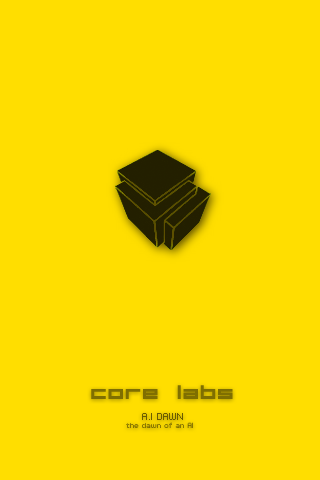
<style>
.page{position:relative;width:320px;height:480px;background:#ffde00}
.page>*{position:absolute;margin:0}
.t1{font:18px "Aerial";color:#7f6f00}
.t2{font:8px "PFTempestaSeven";color:#6b5d00}
.t3{font:6px "PFTempestaSeven"}
</style>
<div class="page">
<p class="t1" style="left:91px;top:385px;width:142px;height:14px">core labs</p>
<p class="t2" style="left:142px;top:413px;width:41px;height:7px">A.I DAWN</p>
<p class="t3" style="left:126px;top:422px;width:67px;height:6px">the dawn of an AI</p>
</div>
